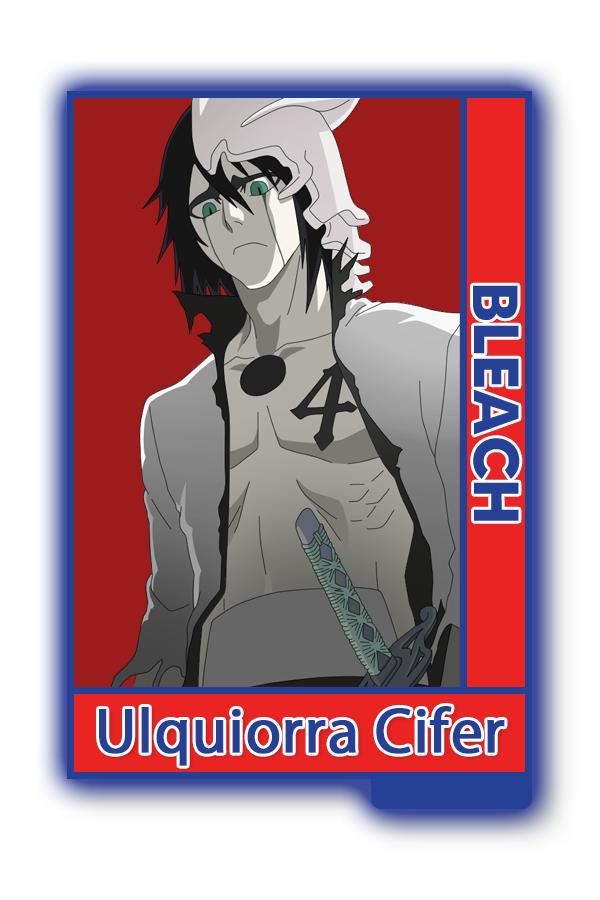
<style>
.page{position:relative;width:600px;height:900px;background:#ffffff}
.page>*{position:absolute;margin:0}
.t1{font:63.6px "MADETOMMY-Bold";color:#254195}
.t2{font:63.6px "MyriadPro-Regular";color:#254195;font-weight:bold}
</style>
<div class="page">
<p class="t1" style="left:473px;top:285px;width:47px;height:236px;rotate:90deg">BLEACH</p>
<p class="t2" style="left:99px;top:706px;width:406px;height:60px">Ulquiorra Cifer</p>
</div>
